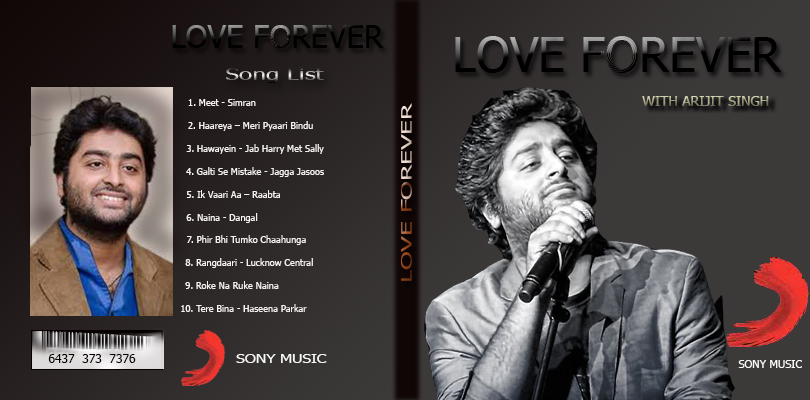
<style>
.page{position:relative;width:810px;height:400px}
.page>*{position:absolute;margin:0}
.t1{font:17.2px "Tahoma";scale:1.42 1}
.t2{font:9.5px "Tahoma";color:#f7f2f2;scale:0.97 1}
.t3{font:14px "Tahoma"}
.t4{font:14px "Tahoma";scale:1.87 1}
.t5{font:12px "Tahoma";color:#040000}
.t6{font:12.6px "Tahoma";color:#fbf8f8;scale:1.24 1}
.t7{font:12.6px "Tahoma";color:#f8f4f4;scale:1.24 1}
.t8{font:11px "Tahoma";color:#fbf8f8}
</style>
<div class="page">
<p class="t1" style="left:226px;top:68px;width:98px;height:15px">Song List</p>
<p class="t2" style="left:181px;top:99px;width:143px;height:213px;text-align:center">1. Meet - Simran<br><br>                    2. Haareya – Meri Pyaari Bindu<br><br>                       3. Hawayein - Jab Harry Met Sally<br><br>                       4. Galti Se Mistake - Jagga Jasoos<br><br>        5. Ik Vaari Aa – Raabta<br><br>6. Naina - Dangal<br><br>                 7. Phir Bhi Tumko Chaahunga<br><br>                   8. Rangdaari - Lucknow Central<br><br>        9. Roke Na Ruke Naina <br><br>               10. Tere Bina - Haseena Parkar</p>
<p class="t3" style="left:642px;top:96px;width:127px;height:10px">WITH ARIJIT SINGH</p>
<p class="t4" style="left:401px;top:103px;width:11px;height:178px;rotate:-90deg">LOVE FOREVER</p>
<p class="t5" style="left:48px;top:354px;width:88px;height:9px">6437  373  7376</p>
<p class="t6" style="left:236px;top:354px;width:91px;height:9px">S<span class="t7">O</span>NY MUSIC</p>
<p class="t8" style="left:738px;top:360px;width:64px;height:8px">SONY MUSIC</p>
</div>
